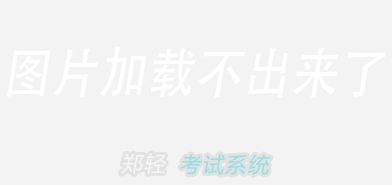
<style>
.page{position:relative;width:392px;height:185px;background:#f3f3f3}
.page>*{position:absolute;margin:0}
.t1{font:54px "AdobeHeitiStd-Regular";letter-spacing:0.02em;color:#ffffff;font-style:italic;scale:0.87 1}
</style>
<div class="page">
<p class="t1" style="left:7px;top:46px;width:379px;height:52px">图片加载不出来了</p>
</div>
